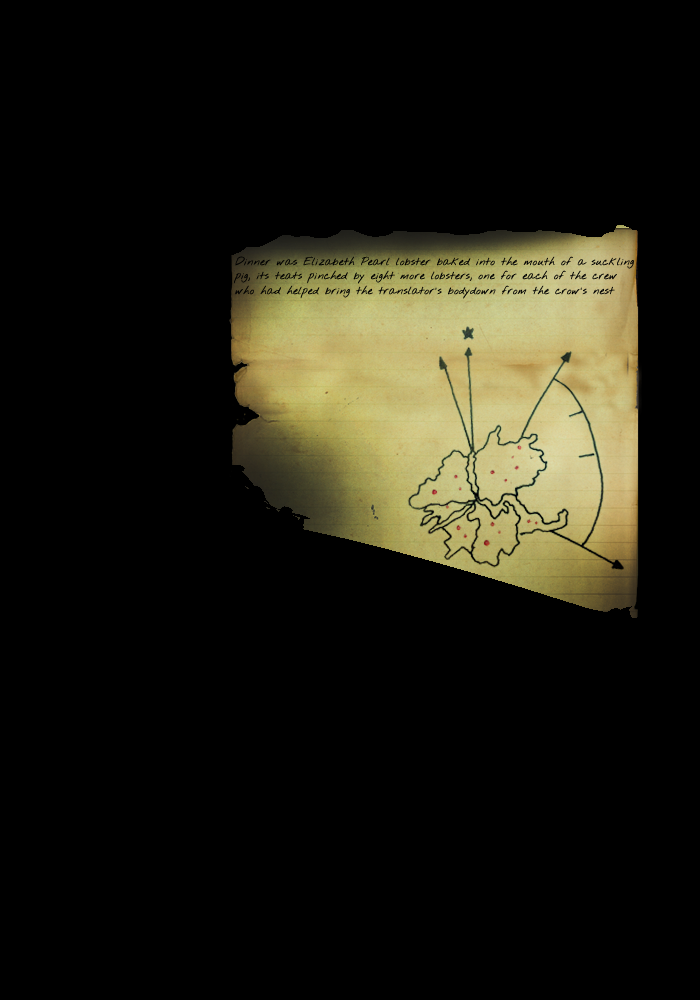
<style>
.page{position:relative;width:700px;height:1000px;background:#000000}
.page>*{position:absolute;margin:0}
.t1{font:11px/14.6px "NothingYouCouldDo";color:#000000;font-weight:bold}
</style>
<div class="page">
<p class="t1" style="left:234px;top:256px;width:400px;height:43px;text-align:justify">Dinner was Elizabeth Pearl lobster baked into the mouth of a suckling<br>pig, its teats pinched by eight more lobsters, one for each of the crew <br>who had helped bring the translator's bodydown from the crow's nest</p>
</div>
